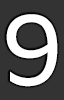
<style>
.page{position:relative;width:64px;height:100px;background:#333333}
.page>*{position:absolute;margin:0}
.t1{font:100px "Amiko-Regular";color:#ffffff}
</style>
<div class="page">
<p class="t1" style="left:6px;top:14px;width:52px;height:73px">9</p>
</div>
